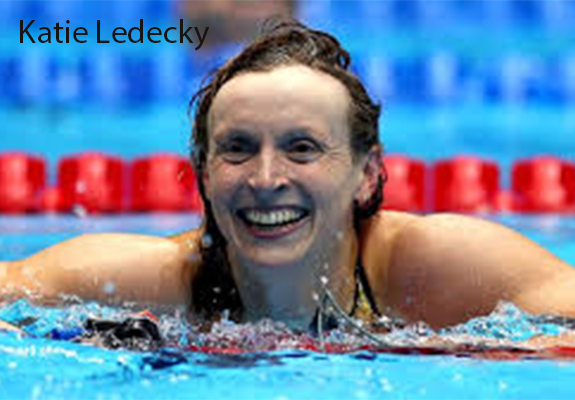
<style>
.page{position:relative;width:575px;height:400px}
.page>*{position:absolute;margin:0}
.t1{font:33.3px "MyriadPro-Regular";color:#181413}
</style>
<div class="page">
<p class="t1" style="left:20px;top:19px;width:190px;height:32px">Katie Ledecky</p>
</div>
